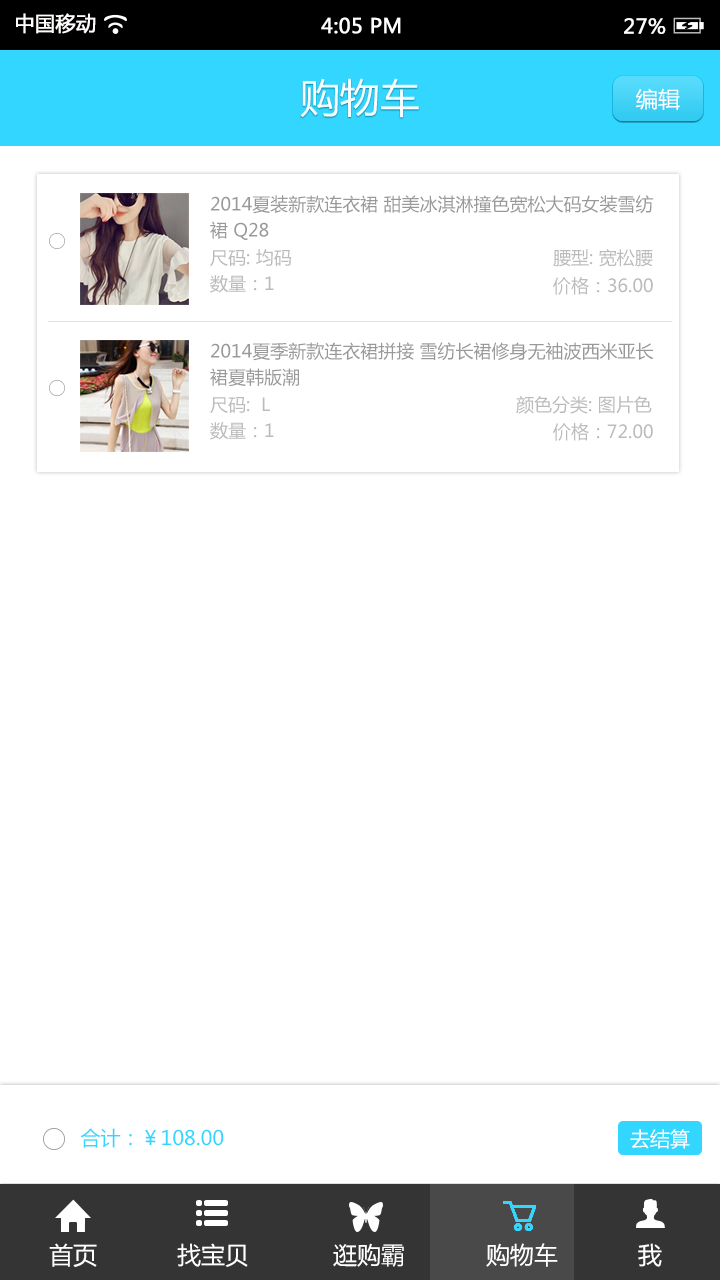
<style>
.page{position:relative;width:720px;height:1280px;background:#ffffff}
.page>*{position:absolute;margin:0}
.t1{font:20px "MicrosoftYaHei";color:#fffcfc;font-weight:bold}
.t2{font:20px "MicrosoftYaHei";color:#ffffff;font-weight:bold}
.t3{font:20px "MicrosoftYaHei";color:#fffefe;font-weight:bold}
.t4{font:40px "MicrosoftYaHei";color:#ffffff}
.t5{font:22px "MicrosoftYaHei";color:#ffffff}
.t6{font:18px/26px "MicrosoftYaHei";color:#999999}
.t7{font:18px "MicrosoftYaHei";color:#bcbbbb}
.t8{font:20px "MicrosoftYaHei";color:#33d6ff}
.t9{font:20px "MicrosoftYaHei";color:#ffffff}
.t10{font:24px "MicrosoftYaHei";color:#ffffff}
</style>
<div class="page">
<p class="t1" style="left:16px;top:13px;width:80px;height:21px">中国移动</p>
<p class="t2" style="left:321px;top:17px;width:80px;height:17px">4:05 PM</p>
<p class="t3" style="left:624px;top:18px;width:42px;height:16px">27%</p>
<p class="t4" style="left:300px;top:78px;width:119px;height:40px">购物车</p>
<p class="t5" style="left:636px;top:88px;width:44px;height:22px">编辑</p>
<p class="t6" style="left:210px;top:195px;width:444px;height:45px">2014夏装新款连衣裙 甜美冰淇淋撞色宽松大码女装雪纺<br>裙 Q28</p>
<p class="t7" style="left:210px;top:249px;width:81px;height:17px">尺码: 均码</p>
<p class="t7" style="left:553px;top:249px;width:100px;height:18px">腰型: 宽松腰</p>
<p class="t7" style="left:210px;top:275px;width:64px;height:18px">数量：1</p>
<p class="t7" style="left:553px;top:277px;width:100px;height:18px">价格：36.00</p>
<p class="t6" style="left:210px;top:342px;width:444px;height:45px">2014夏季新款连衣裙拼接 雪纺长裙修身无袖波西米亚长<br>裙夏韩版潮</p>
<p class="t7" style="left:210px;top:397px;width:60px;height:16px">尺码:  L</p>
<p class="t7" style="left:516px;top:396px;width:136px;height:18px">颜色分类: 图片色</p>
<p class="t7" style="left:210px;top:422px;width:64px;height:18px">数量：1</p>
<p class="t7" style="left:553px;top:423px;width:100px;height:18px">价格：72.00</p>
<p class="t8" style="left:80px;top:1128px;width:144px;height:20px">合计：￥108.00</p>
<p class="t9" style="left:630px;top:1129px;width:60px;height:20px">去结算</p>
<p class="t10" style="left:49px;top:1243px;width:48px;height:24px">首页</p>
<p class="t10" style="left:177px;top:1243px;width:71px;height:24px">找宝贝</p>
<p class="t10" style="left:333px;top:1243px;width:71px;height:24px">逛购霸</p>
<p class="t10" style="left:486px;top:1243px;width:72px;height:24px">购物车</p>
<p class="t10" style="left:638px;top:1243px;width:24px;height:24px">我</p>
</div>
